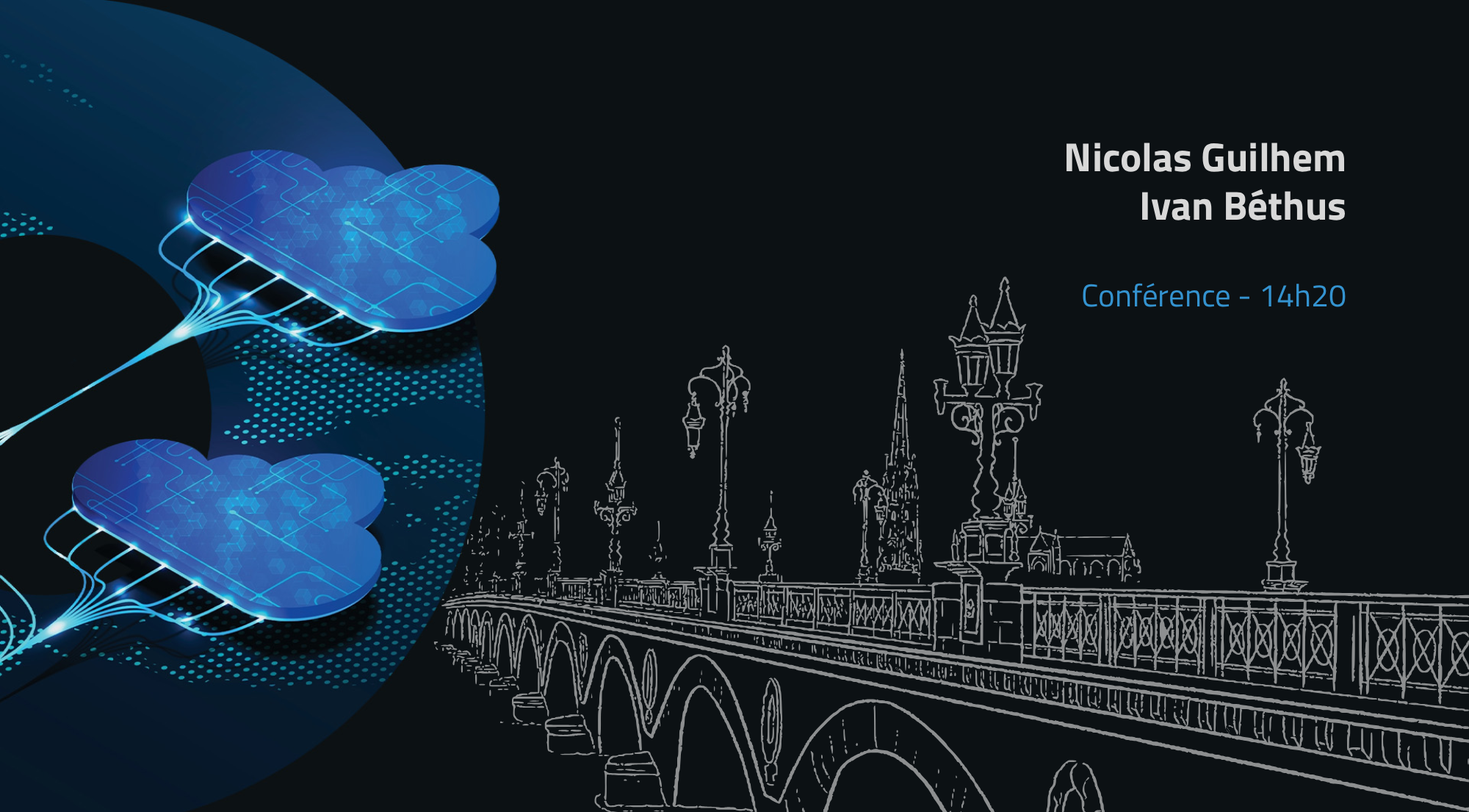
<style>
.page{position:relative;width:1469px;height:812px;background:#0c1114}
.page>*{position:absolute;margin:0}
.t1{font:40.4px "TitilliumWeb-Bold";color:#d8d8d8}
.t2{font:31.6px "TitilliumWeb-Regular";color:#3493d0}
</style>
<div class="page">
<p class="t1" style="left:1067px;top:143px;width:279px;height:164px;text-align:right">Nicolas Guilhem<br>Ivan Béthus<br><br><span class="t2">Conférence - 14h20</span></p>
</div>
